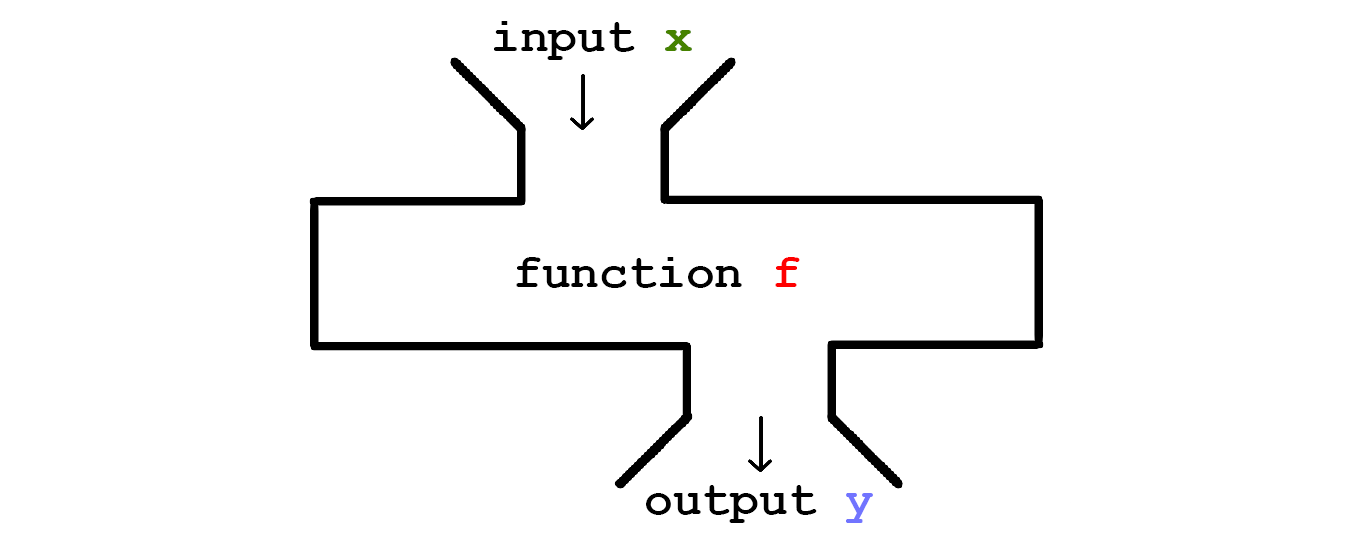
<style>
.page{position:relative;width:1353px;height:546px;background:#ffffff}
.page>*{position:absolute;margin:0}
.t1{font:48px "CourierNewPS-BoldMT";color:#000000}
.t2{font:48px "CourierNewPS-BoldMT";color:#468200}
.t3{font:48px "CourierNewPS-BoldMT";color:#fe0000}
.t4{font:48px "CourierNewPS-BoldMT";color:#7174ff}
</style>
<div class="page">
<p class="t1" style="left:494px;top:21px;width:198px;height:39px">input <span class="t2">x</span></p>
<p class="t1" style="left:516px;top:257px;width:284px;height:31px">function <span class="t3">f</span></p>
<p class="t1" style="left:646px;top:485px;width:227px;height:38px">output <span class="t4">y</span></p>
</div>
